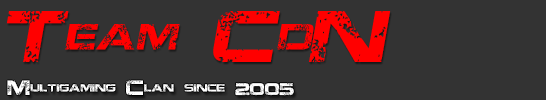
<style>
.page{position:relative;width:546px;height:100px;background:#333333}
.page>*{position:absolute;margin:0}
.t1{font:73.1px "JacintoSans";color:#ff0000;font-style:italic}
.t2{font:20.8px "JacintoSans";color:#ffffff}
.t3{font:16.7px "JacintoSans";color:#ffffff}
</style>
<div class="page">
<p class="t1" style="left:6px;top:11px;width:385px;height:51px">Team CdN</p>
<p class="t2" style="left:7px;top:80px;width:287px;height:16px">Multigaming Clan since <span class="t3">2005</span></p>
</div>
